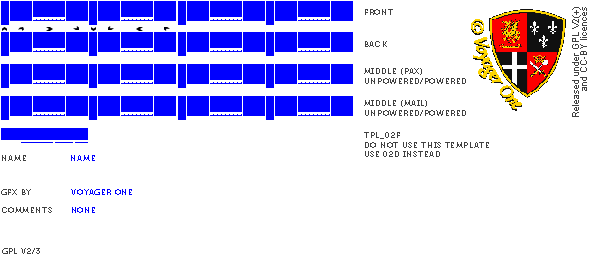
<style>
.page{position:relative;width:600px;height:270px;background:#ffffff}
.page>*{position:absolute;margin:0}
.t1{font:8px "Museo700-Regular";letter-spacing:0.075em;color:#404040;text-transform:uppercase}
.t2{font:8px "Museo700-Regular";letter-spacing:0.075em;color:#0000ff;text-transform:uppercase}
</style>
<div class="page">
<p class="t1" style="left:365px;top:9px;width:28px;height:6px">front</p>
<p class="t1" style="left:365px;top:41px;width:22px;height:6px">back</p>
<p class="t1" style="left:364px;top:68px;width:102px;height:16px">middle (pax)<br>unpowered/powered</p>
<p class="t1" style="left:364px;top:100px;width:102px;height:16px">middle (mail)<br>unpowered/powered</p>
<p class="t1" style="left:364px;top:132px;width:125px;height:25px">tpl_02f<br>do not use this template<br>use 02d instead</p>
<p class="t1" style="left:2px;top:155px;width:24px;height:6px">name</p>
<p class="t2" style="left:71px;top:155px;width:24px;height:6px">name</p>
<p class="t1" style="left:1px;top:189px;width:30px;height:6px">gfx by</p>
<p class="t2" style="left:71px;top:189px;width:61px;height:6px">voyager one</p>
<p class="t1" style="left:2px;top:207px;width:50px;height:6px">comments</p>
<p class="t2" style="left:72px;top:207px;width:23px;height:6px">none</p>
<p class="t1" style="left:2px;top:248px;width:38px;height:6px">gpl v2/3</p>
</div>
